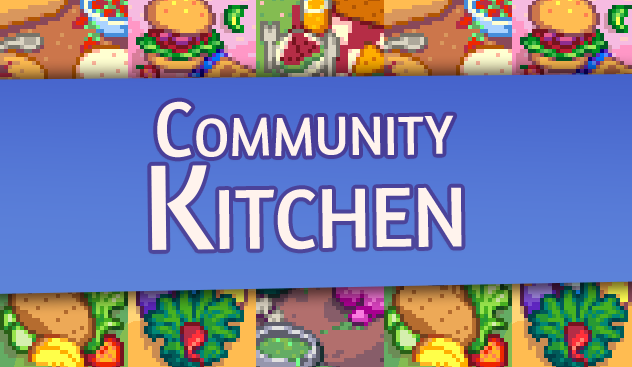
<style>
.page{position:relative;width:632px;height:367px}
.page>*{position:absolute;margin:0}
.t1{font:80px "Amaranth-Regular";color:#fff3ed;font-variant:small-caps;scale:0.95 1}
.t2{font:124px "Amaranth-Regular";color:#fff3ed;font-variant:small-caps;scale:0.95 1}
</style>
<div class="page">
<p class="t1" style="left:157px;top:101px;width:297px;height:57px;rotate:-1deg">Community</p>
<p class="t2" style="left:151px;top:165px;width:311px;height:85px;rotate:-1deg">Kitchen</p>
</div>
